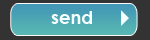
<style>
.page{position:relative;width:150px;height:40px;background:#333333}
.page>*{position:absolute;margin:0}
.t1{font:18px "CenturyGothic-Bold";color:#f5ffff}
</style>
<div class="page">
<p class="t1" style="left:51px;top:11px;width:41px;height:13px">send</p>
</div>
